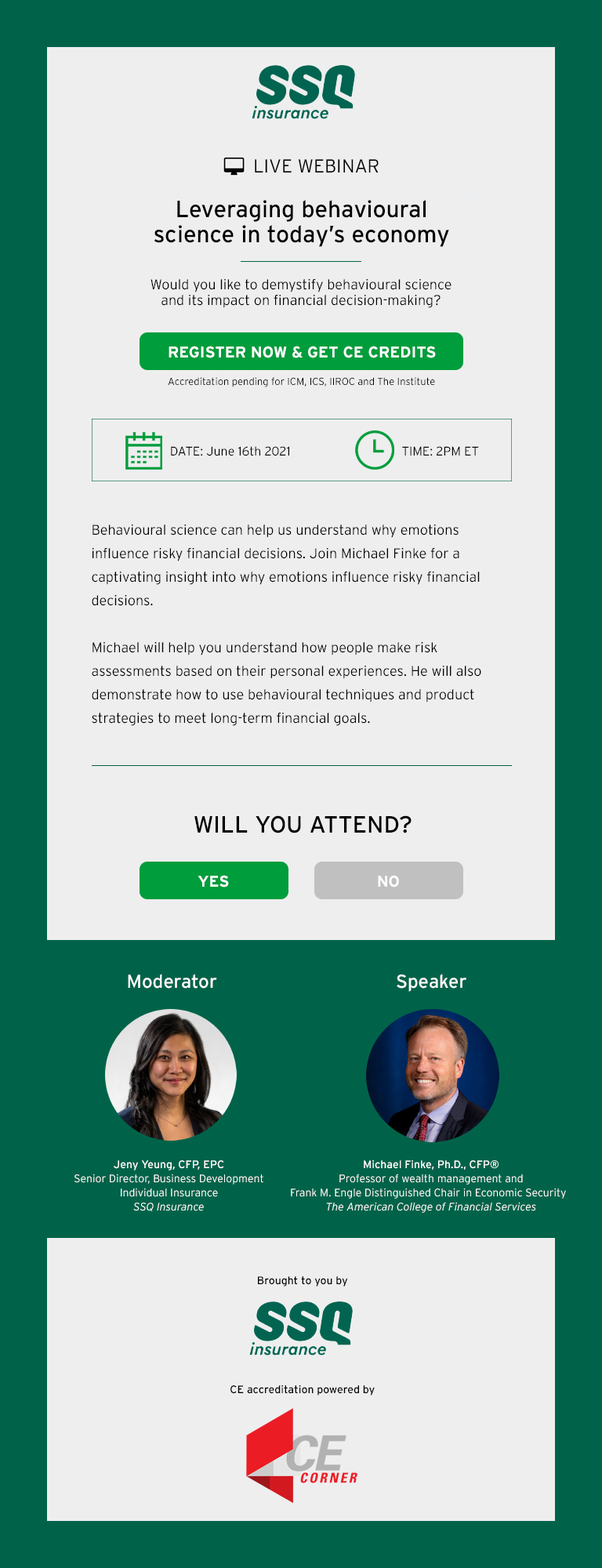
<style>
.page{position:relative;width:602px;height:1568px;background:#eeeeee}
.page>*{position:absolute;margin:0}
.t1{font:18.8px "Interstate-Light";color:#000000}
.t2{font:23.5px/25.1px "Interstate-Regular";color:#000000}
.t3{font:14.1px/15.7px "Interstate-Light";color:#000000}
.t4{font:15.7px "Interstate-Bold";color:#ffffff}
.t5{font:10.2px "Interstate-Light";color:#000000}
.t6{font:12.5px "Interstate-Light";color:#000000}
.t7{font:14.1px/23.5px "Interstate-Light";color:#000000}
.t8{font:23.5px "Interstate-Regular";color:#000000}
.t9{font:18.8px "Interstate-Regular";color:#ffffff}
.t10{font:11px/14.1px "Interstate-Light";color:#ffffff}
.t11{font:11px/14.1px "Interstate-Regular";color:#ffffff}
.t12{font:11px/14.1px "Interstate-LightItalic";color:#ffffff}
.t13{font:11px "Interstate-Regular";color:#000000}
</style>
<div class="page">
<p class="t1" style="left:255px;top:159px;width:124px;height:13px">LIVE WEBINAR</p>
<p class="t2" style="left:154px;top:200px;width:295px;height:47px;text-align:center">Leveraging behavioural<br>science in today’s economy</p>
<p class="t3" style="left:151px;top:279px;width:301px;height:29px;text-align:center">Would you like to demystify behavioural science<br>and its impact on financial decision-making?</p>
<p class="t4" style="left:169px;top:346px;width:267px;height:12px">REGISTER NOW &amp; GET CE CREDITS</p>
<p class="t5" style="left:168px;top:377px;width:267px;height:10px">Accreditation pending for ICM, ICS, IIROC and The Institute</p>
<p class="t6" style="left:171px;top:446px;width:118px;height:10px">DATE: June 16th 2021</p>
<p class="t6" style="left:402px;top:446px;width:77px;height:10px">TIME: 2PM ET</p>
<p class="t7" style="left:92px;top:524px;width:389px;height:202px">Behavioural science can help us understand why emotions<br>influence risky financial decisions. Join Michael Finke for a<br>captivating insight into why emotions influence risky financial<br>decisions.<br><br>Michael will help you understand how people make risk<br>assessments based on their personal experiences. He will also<br>demonstrate how to use behavioural techniques and product<br>strategies to meet long-term financial goals.</p>
<p class="t8" style="left:194px;top:815px;width:218px;height:18px">WILL YOU ATTEND?</p>
<p class="t4" style="left:198px;top:875px;width:31px;height:12px">YES</p>
<p class="t4" style="left:378px;top:875px;width:21px;height:12px">NO</p>
<p class="t9" style="left:128px;top:974px;width:89px;height:15px">Moderator</p>
<p class="t9" style="left:397px;top:974px;width:69px;height:18px">Speaker</p>
<p class="t10" style="left:74px;top:1160px;width:189px;height:51px;text-align:center"><span class="t11">Jeny Yeung, CFP, EPC<br></span>Senior Director, Business Development<br>Individual Insurance<br><span class="t12">SSQ Insurance</span></p>
<p class="t10" style="left:291px;top:1160px;width:275px;height:53px;text-align:center"><span class="t11">Michael Finke, Ph.D., CFP®<br></span>Professor of wealth management and<br>Frank M. Engle Distinguished Chair in Economic Security  <br><span class="t12">The American College of Financial Services</span></p>
<p class="t13" style="left:258px;top:1276px;width:90px;height:11px">Brought to you by</p>
<p class="t13" style="left:230px;top:1385px;width:145px;height:11px">CE accreditation powered by</p>
</div>
